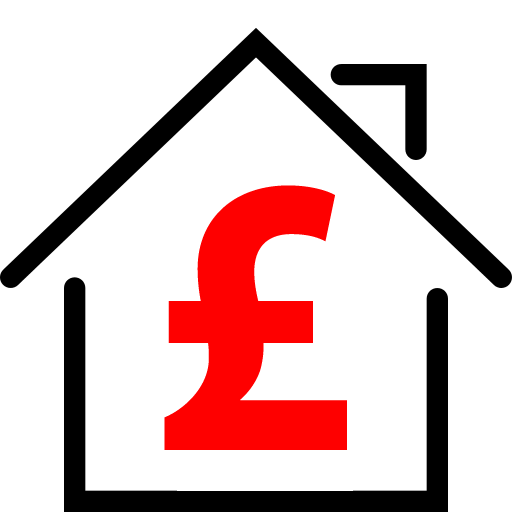
<style>
.page{position:relative;width:512px;height:512px;background:#ffffff}
.page>*{position:absolute;margin:0}
.t1{font:400px "MyriadPro-Bold";color:#fe0000}
</style>
<div class="page">
<p class="t1" style="left:164px;top:185px;width:183px;height:265px">£</p>
</div>
